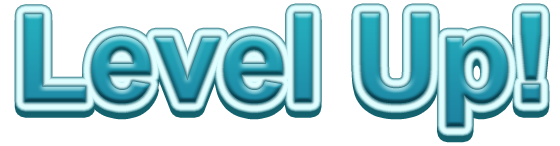
<style>
.page{position:relative;width:560px;height:146px;background:#ffffff}
.page>*{position:absolute;margin:0}
.t1{font:122.8px "Arial-BoldMT";scale:0.97 1}
</style>
<div class="page">
<p class="t1" style="left:24px;top:13px;width:516px;height:114px">Level Up!</p>
<p class="t1" style="left:24px;top:19px;width:516px;height:114px">Level Up!</p>
</div>
